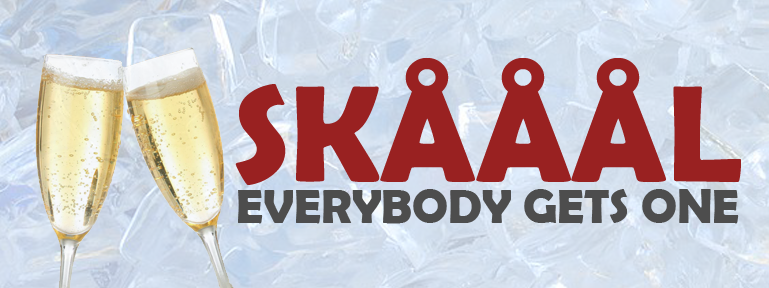
<style>
.page{position:relative;width:769px;height:288px}
.page>*{position:absolute;margin:0}
.t1{font:137.6px "BerlinSansFBDemi-Bold";color:#992121}
.t2{font:47.7px "BerlinSansFBDemi-Bold";color:#4d4d4d}
</style>
<div class="page">
<p class="t1" style="left:235px;top:58px;width:506px;height:127px">SKÅÅÅL</p>
<p class="t2" style="left:238px;top:189px;width:501px;height:35px">EVERYBODY GETS ONE</p>
</div>
